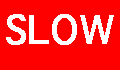
<style>
.page{position:relative;width:120px;height:70px;background:#ff0000}
.page>*{position:absolute;margin:0}
.t1{font:37px "Sathu";color:#ffffff;font-weight:bold}
</style>
<div class="page">
<p class="t1" style="left:6px;top:14px;width:108px;height:31px">SLOW</p>
</div>
